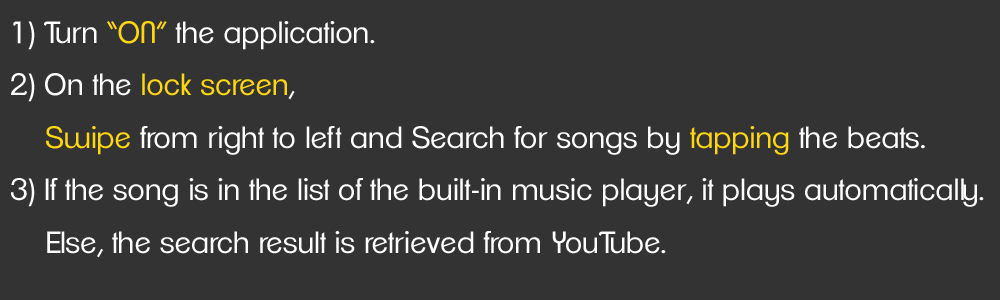
<style>
.page{position:relative;width:1000px;height:300px;background:#333333}
.page>*{position:absolute;margin:0}
.t1{font:30px "ClementePDag-Book";color:#ffffff}
.t2{font:30px "ClementePDag-Book";color:#ffd612}
</style>
<div class="page">
<p class="t1" style="left:11px;top:21px;width:973px;height:237px">1) Turn <span class="t2">“ON”</span> the application.<br>2) On the <span class="t2">lock screen</span>,<br>    <span class="t2">Swipe</span> from right to left and Search for songs by <span class="t2">tapping</span> the beats.<br>3) If the song is in the list of the built-in music player, it plays automatically.<br>    Else, the search result is retrieved from YouTube.</p>
</div>
